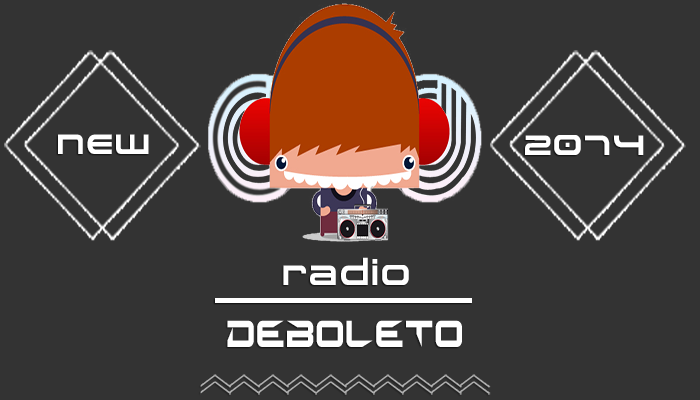
<style>
.page{position:relative;width:700px;height:400px;background:#333333}
.page>*{position:absolute;margin:0}
.t1{font:34.9px "Spaceman";color:#ffffff;scale:0.8 1}
.t2{font:26.2px "Sharp";color:#ffffff;scale:0.8 1}
</style>
<div class="page">
<p class="t1" style="left:58px;top:134px;width:91px;height:20px">NEW</p>
<p class="t1" style="left:525px;top:135px;width:119px;height:20px">2014</p>
<p class="t1" style="left:283px;top:257px;width:126px;height:28px">RADIO</p>
<p class="t2" style="left:227px;top:320px;width:235px;height:27px">DEBOLETO</p>
</div>
